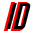
<style>
.page{position:relative;width:32px;height:32px;background:#ffffff}
.page>*{position:absolute;margin:0}
.t1{font:40px "BigNoodleTooOblique"}
.t2{font:36px "BigNoodleTooOblique";color:#010000}
</style>
<div class="page">
<p class="t1" style="left:3px;top:2px;width:27px;height:29px">ID</p>
<p class="t2" style="left:6px;top:3px;width:25px;height:26px">ID</p>
</div>
